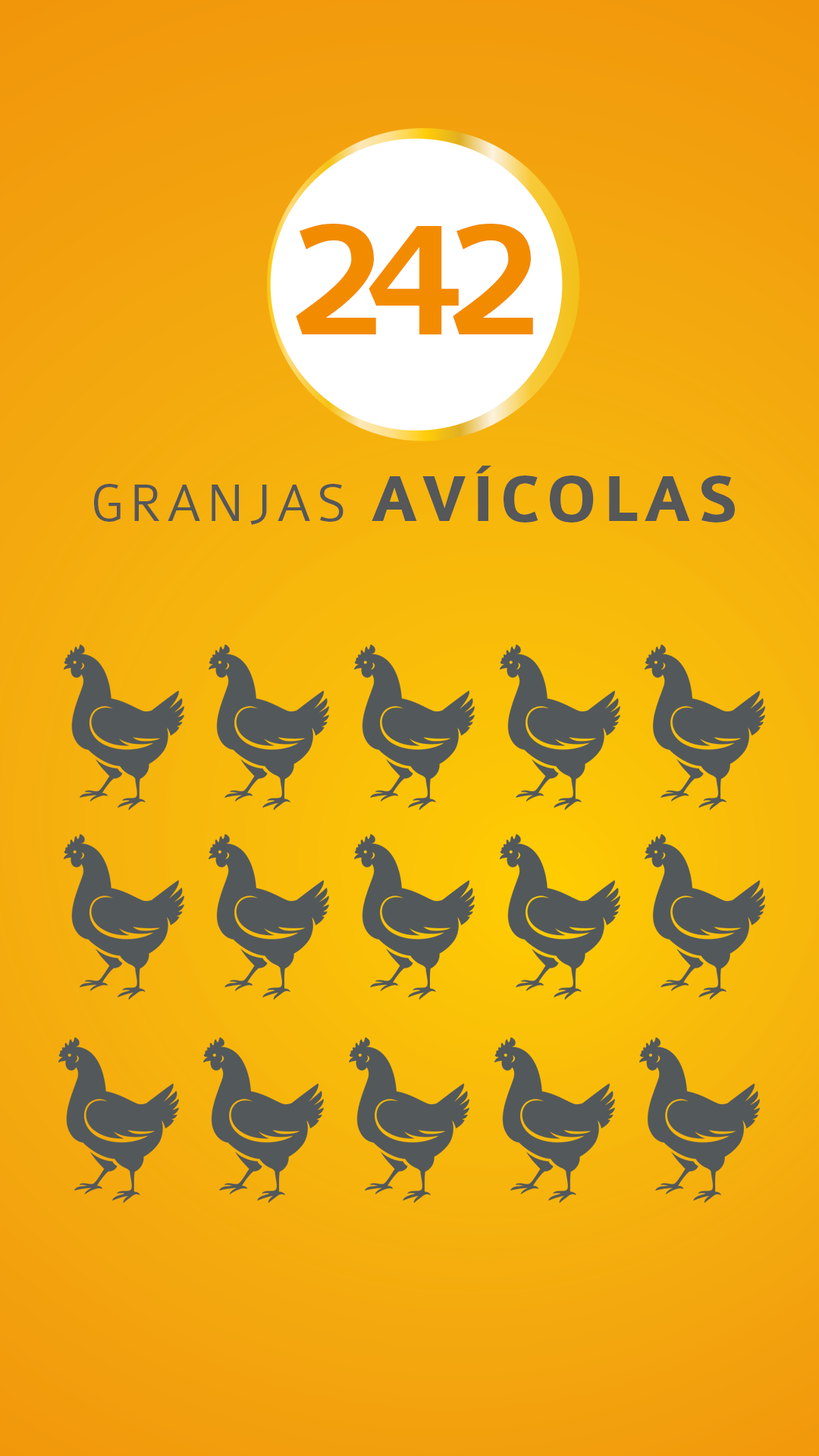
<style>
.page{position:relative;width:819px;height:1456px}
.page>*{position:absolute;margin:0}
.t1{font:178.5px "Colaborate-Medium";letter-spacing:-0.1em;color:#f38b00}
.t2{font:68.8px "Colaborate-Bold";letter-spacing:0.08em;color:#555759}
.t3{font:56.6px "Colaborate-Light";letter-spacing:0.08em;color:#555759}
</style>
<div class="page">
<p class="t1" style="left:296px;top:224px;width:237px;height:110px">242</p>
<p class="t2" style="left:94px;top:466px;width:641px;height:59px"><span class="t3">GRANJAS </span>AVÍCOLAS</p>
</div>
